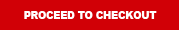
<style>
.page{position:relative;width:179px;height:30px;background:#d10006}
.page>*{position:absolute;margin:0}
.t1{font:18.2px "Arial-Black";color:#ffffff;scale:0.9 1}
</style>
<div class="page">
<p class="t1" style="left:24px;top:11px;width:133px;height:8px">PROCEED TO CHECKOUT</p>
</div>
